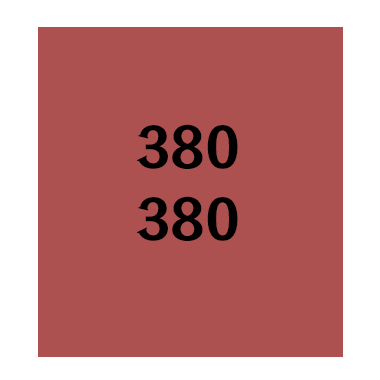
<style>
.page{position:relative;width:380px;height:380px;background:#ac5050}
.page>*{position:absolute;margin:0}
.t1{font:55px/72px "WarhavenB";color:#000000}
</style>
<div class="page">
<p class="t1" style="left:137px;top:124px;width:101px;height:117px;text-align:center">380<br>380</p>
</div>
